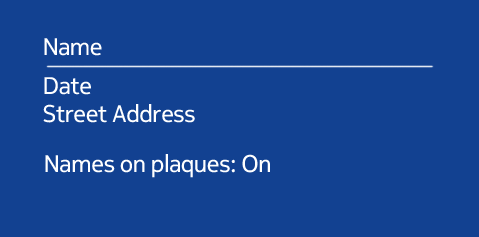
<style>
.page{position:relative;width:479px;height:237px;background:#124191}
.page>*{position:absolute;margin:0}
.t1{font:24px "NokiaPureHeadline-Regular";color:#ffffff}
.t2{font:24px "NokiaPureHeadline-Regular";letter-spacing:0.005em;color:#ffffff}
</style>
<div class="page">
<p class="t1" style="left:44px;top:38px;width:58px;height:18px">Name</p>
<p class="t1" style="left:44px;top:77px;width:47px;height:18px">Date</p>
<p class="t2" style="left:43px;top:104px;width:152px;height:19px">Street Address</p>
<p class="t2" style="left:45px;top:154px;width:225px;height:24px">Names on plaques: On</p>
</div>
